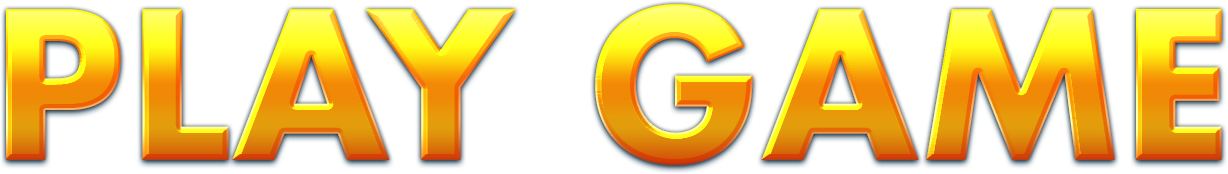
<style>
.page{position:relative;width:1228px;height:174px;background:#ffffff}
.page>*{position:absolute;margin:0}
.t1{font:200px "FuturaStd-Bold";letter-spacing:0.025em;text-transform:uppercase}
</style>
<div class="page">
<p class="t1" style="left:6px;top:4px;width:1216px;height:161px">PLAY GAME</p>
</div>
